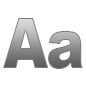
<style>
.page{position:relative;width:86px;height:86px;background:#ffffff}
.page>*{position:absolute;margin:0}
.t1{font:70.1px "Arial-Black";letter-spacing:-0.05em;scale:0.83 1}
</style>
<div class="page">
<p class="t1" style="left:3px;top:18px;width:80px;height:51px">Aa</p>
</div>
